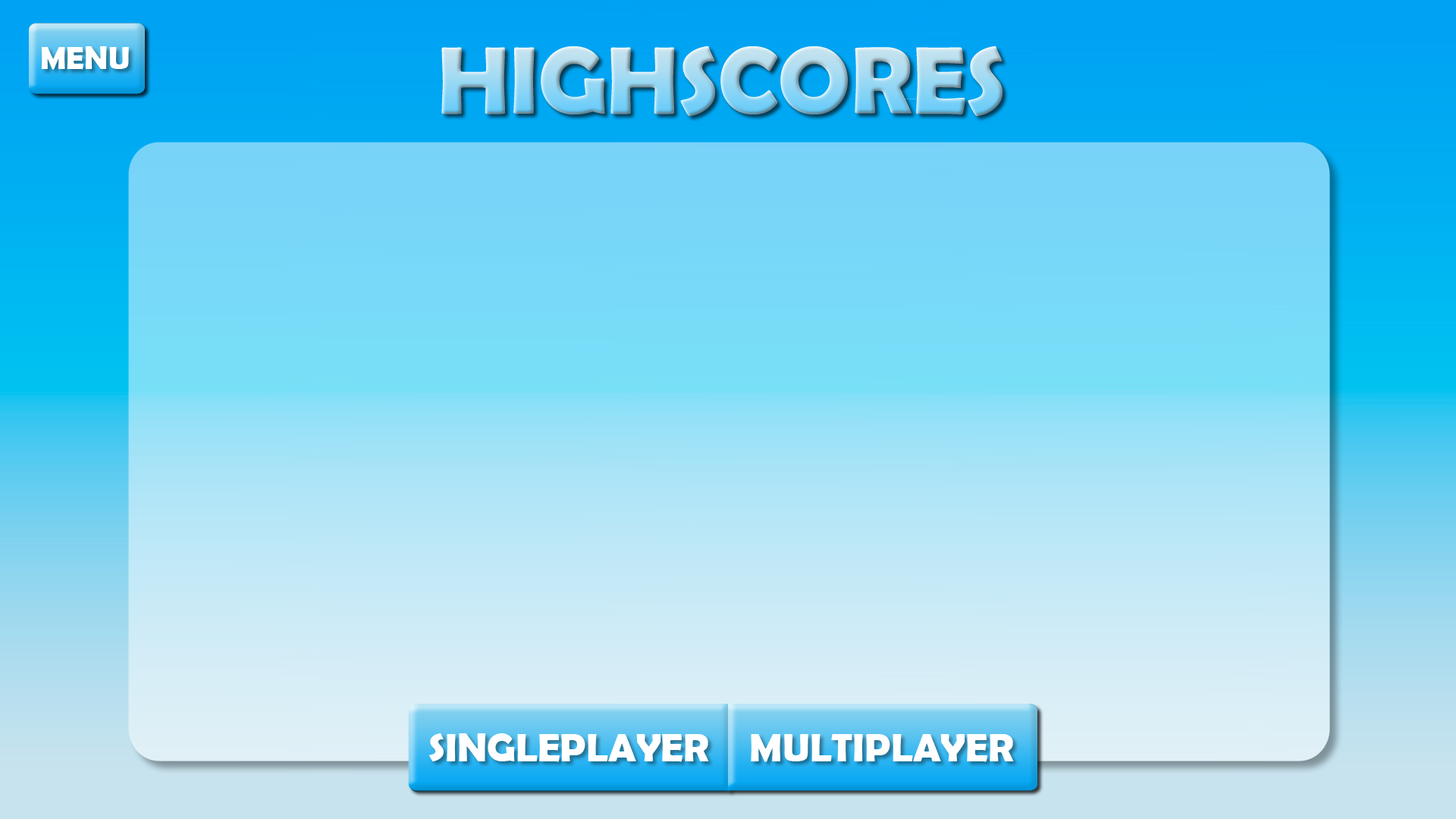
<style>
.page{position:relative;width:1456px;height:819px}
.page>*{position:absolute;margin:0}
.t1{font:32.1px "BerlinSansFBDemi-Bold";color:#ffffff}
.t2{font:96.3px "BerlinSansFBDemi-Bold"}
.t3{font:40.1px "BerlinSansFBDemi-Bold";color:#ffffff}
</style>
<div class="page">
<p class="t1" style="left:41px;top:46px;width:88px;height:24px">MENU</p>
<p class="t2" style="left:441px;top:46px;width:562px;height:70px">HIGHSCORES</p>
<p class="t3" style="left:429px;top:733px;width:280px;height:29px">SINGLEPLAYER</p>
<p class="t3" style="left:431px;top:735px;width:280px;height:29px">SINGLEPLAYER</p>
<p class="t3" style="left:751px;top:734px;width:263px;height:28px">MULTIPLAYER</p>
<p class="t3" style="left:751px;top:734px;width:263px;height:28px">MULTIPLAYER</p>
</div>
